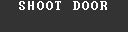
<style>
.page{position:relative;width:128px;height:32px;background:#333333}
.page>*{position:absolute;margin:0}
.t1{font:12.9px "Terminal";letter-spacing:0.075em;color:#ffffff}
</style>
<div class="page">
<p class="t1" style="left:19px;top:1px;width:88px;height:9px">SHOOT DOOR</p>
</div>
